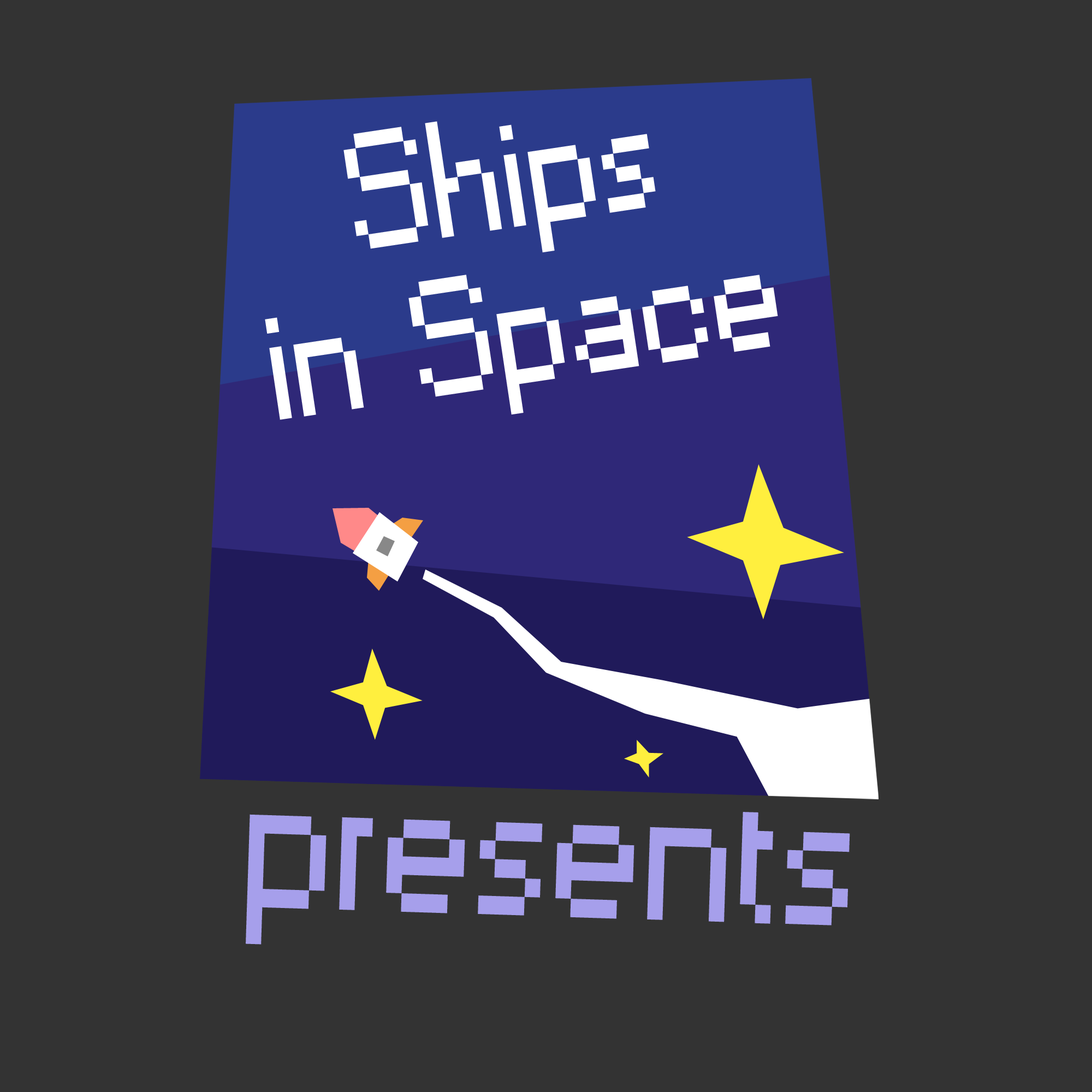
<style>
.page{position:relative;width:1092px;height:1092px;background:#333333}
.page>*{position:absolute;margin:0}
.t1{font:154.7px/155.9px "Small Fonts";color:#ffffff}
.t2{font:197px "Small Fonts";color:#a69feb}
</style>
<div class="page">
<p class="t1" style="left:265px;top:121px;width:513px;height:299px;text-align:center;rotate:-9deg">Ships <br>in  Space</p>
<p class="t2" style="left:246px;top:812px;width:604px;height:133px;rotate:2deg">presents</p>
</div>
